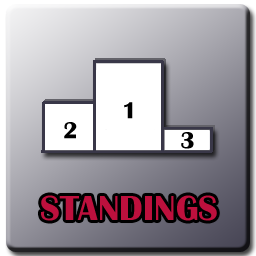
<style>
.page{position:relative;width:256px;height:256px}
.page>*{position:absolute;margin:0}
.t1{font:24px "BritannicBold";color:#000000}
.t2{font:36px "BritannicBold";color:#bd103d}
</style>
<div class="page">
<p class="t1" style="left:124px;top:102px;width:9px;height:17px">1</p>
<p class="t1" style="left:64px;top:122px;width:13px;height:17px">2</p>
<p class="t1" style="left:181px;top:132px;width:13px;height:17px">3</p>
<p class="t2" style="left:41px;top:195px;width:176px;height:26px">STANDINGS</p>
</div>
